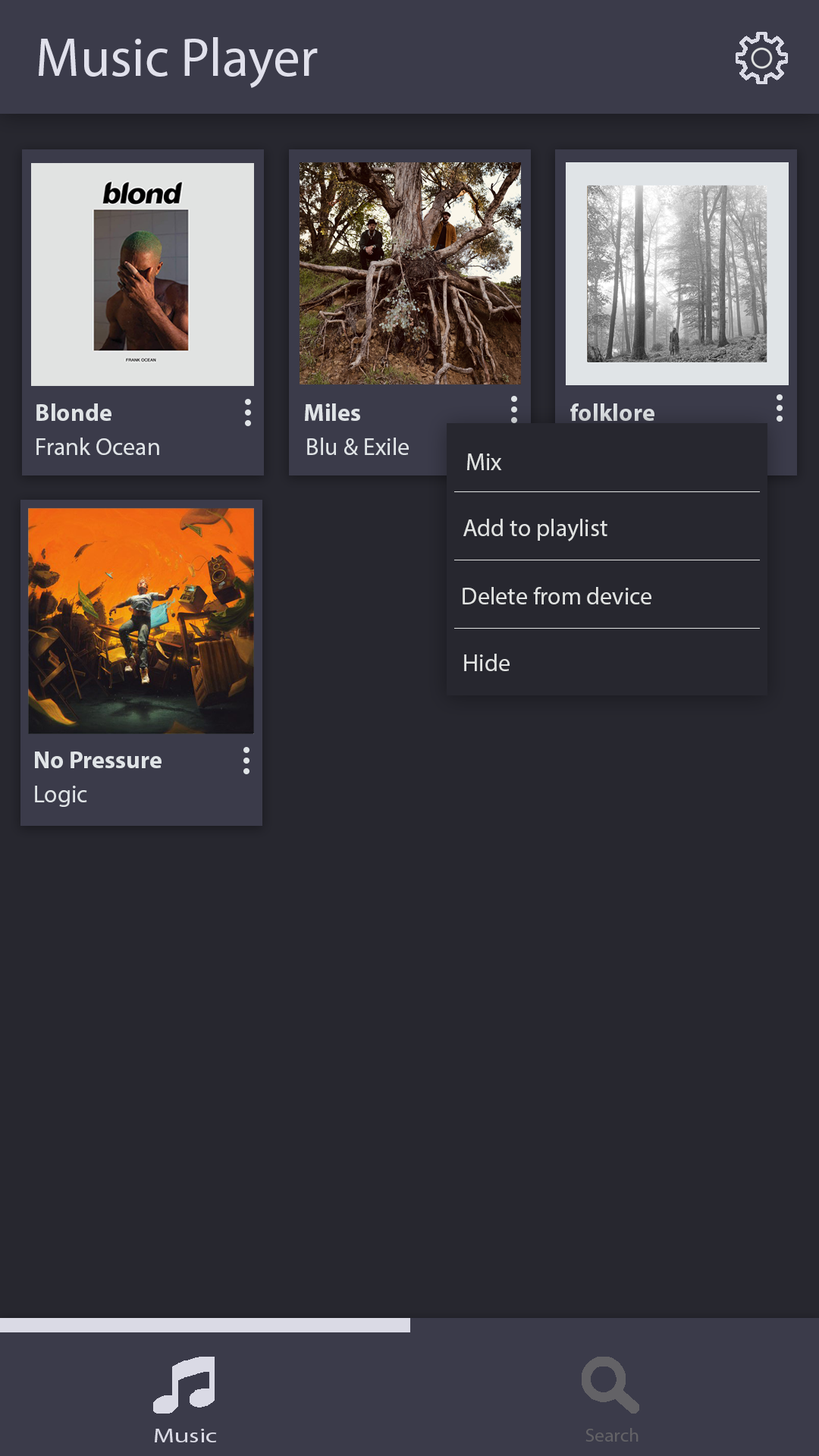
<style>
.page{position:relative;width:819px;height:1456px;background:#27272f}
.page>*{position:absolute;margin:0}
.t1{font:54.6px "MyriadPro-Regular";color:#e0e0eb}
.t2{font:24.3px "MyriadPro-Bold";color:#e0e4e7}
.t3{font:24.3px "MyriadPro-Regular";color:#e0e4e7}
.t4{font:24.3px "MyriadPro-Regular";color:#e1e3e2}
.t5{font:19.4px "MyriadPro-Regular";color:#dadae5;scale:1.36 1}
.t6{font:18.6px "MyriadPro-Regular";color:#636266;scale:1.05 1}
</style>
<div class="page">
<p class="t1" style="left:39px;top:37px;width:279px;height:51px">Music Player</p>
<p class="t2" style="left:36px;top:403px;width:75px;height:18px">Blonde</p>
<p class="t2" style="left:305px;top:403px;width:55px;height:18px">Miles</p>
<p class="t2" style="left:570px;top:403px;width:84px;height:18px">folklore</p>
<p class="t3" style="left:36px;top:438px;width:123px;height:17px">Frank Ocean</p>
<p class="t3" style="left:307px;top:438px;width:102px;height:17px">Blu &amp; Exile</p>
<p class="t4" style="left:467px;top:453px;width:35px;height:17px">Mix</p>
<p class="t4" style="left:463px;top:519px;width:144px;height:22px">Add to playlist</p>
<p class="t4" style="left:463px;top:587px;width:188px;height:17px">Delete from device</p>
<p class="t4" style="left:464px;top:654px;width:46px;height:17px">Hide</p>
<p class="t2" style="left:35px;top:751px;width:127px;height:17px">No Pressure</p>
<p class="t3" style="left:35px;top:786px;width:52px;height:21px">Logic</p>
<p class="t5" style="left:155px;top:1429px;width:62px;height:13px">Music</p>
<p class="t6" style="left:585px;top:1428px;width:54px;height:14px">Search</p>
</div>
